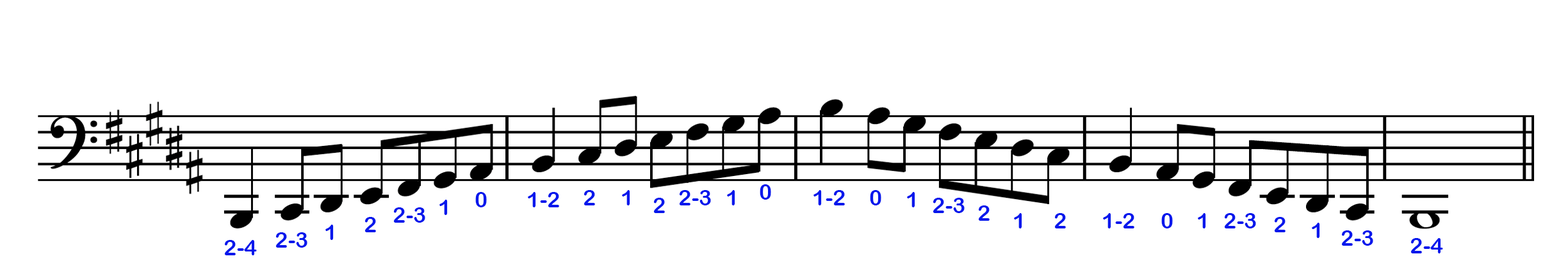
<style>
.page{position:relative;width:1568px;height:279px;background:#ffffff}
.page>*{position:absolute;margin:0}
.t1{font:21.8px "ArialRoundedMTBold";color:#0417ec}
</style>
<div class="page">
<p class="t1" style="left:760px;top:184px;width:11px;height:16px">0</p>
<p class="t1" style="left:475px;top:192px;width:12px;height:16px">0</p>
<p class="t1" style="left:528px;top:192px;width:31px;height:16px">1-2</p>
<p class="t1" style="left:584px;top:190px;width:11px;height:16px">2</p>
<p class="t1" style="left:622px;top:190px;width:8px;height:16px">1</p>
<p class="t1" style="left:653px;top:198px;width:12px;height:15px">2</p>
<p class="t1" style="left:679px;top:190px;width:32px;height:16px">2-3</p>
<p class="t1" style="left:727px;top:190px;width:8px;height:16px">1</p>
<p class="t1" style="left:813px;top:190px;width:32px;height:16px">1-2</p>
<p class="t1" style="left:870px;top:190px;width:11px;height:16px">0</p>
<p class="t1" style="left:907px;top:192px;width:8px;height:16px">1</p>
<p class="t1" style="left:933px;top:198px;width:32px;height:15px">2-3</p>
<p class="t1" style="left:393px;top:208px;width:32px;height:15px">2-3</p>
<p class="t1" style="left:439px;top:200px;width:9px;height:15px">1</p>
<p class="t1" style="left:978px;top:206px;width:12px;height:15px">2</p>
<p class="t1" style="left:364px;top:217px;width:12px;height:16px">2</p>
<p class="t1" style="left:1014px;top:213px;width:8px;height:16px">1</p>
<p class="t1" style="left:1054px;top:213px;width:12px;height:16px">2</p>
<p class="t1" style="left:1103px;top:213px;width:31px;height:16px">1-2</p>
<p class="t1" style="left:1161px;top:213px;width:12px;height:16px">0</p>
<p class="t1" style="left:1198px;top:213px;width:8px;height:16px">1</p>
<p class="t1" style="left:1224px;top:213px;width:32px;height:16px">2-3</p>
<p class="t1" style="left:1274px;top:217px;width:12px;height:16px">2</p>
<p class="t1" style="left:275px;top:233px;width:32px;height:15px">2-3</p>
<p class="t1" style="left:325px;top:225px;width:9px;height:15px">1</p>
<p class="t1" style="left:1312px;top:223px;width:8px;height:15px">1</p>
<p class="t1" style="left:1341px;top:231px;width:32px;height:15px">2-3</p>
<p class="t1" style="left:224px;top:240px;width:33px;height:16px">2-4</p>
<p class="t1" style="left:1410px;top:238px;width:33px;height:16px">2-4</p>
</div>
